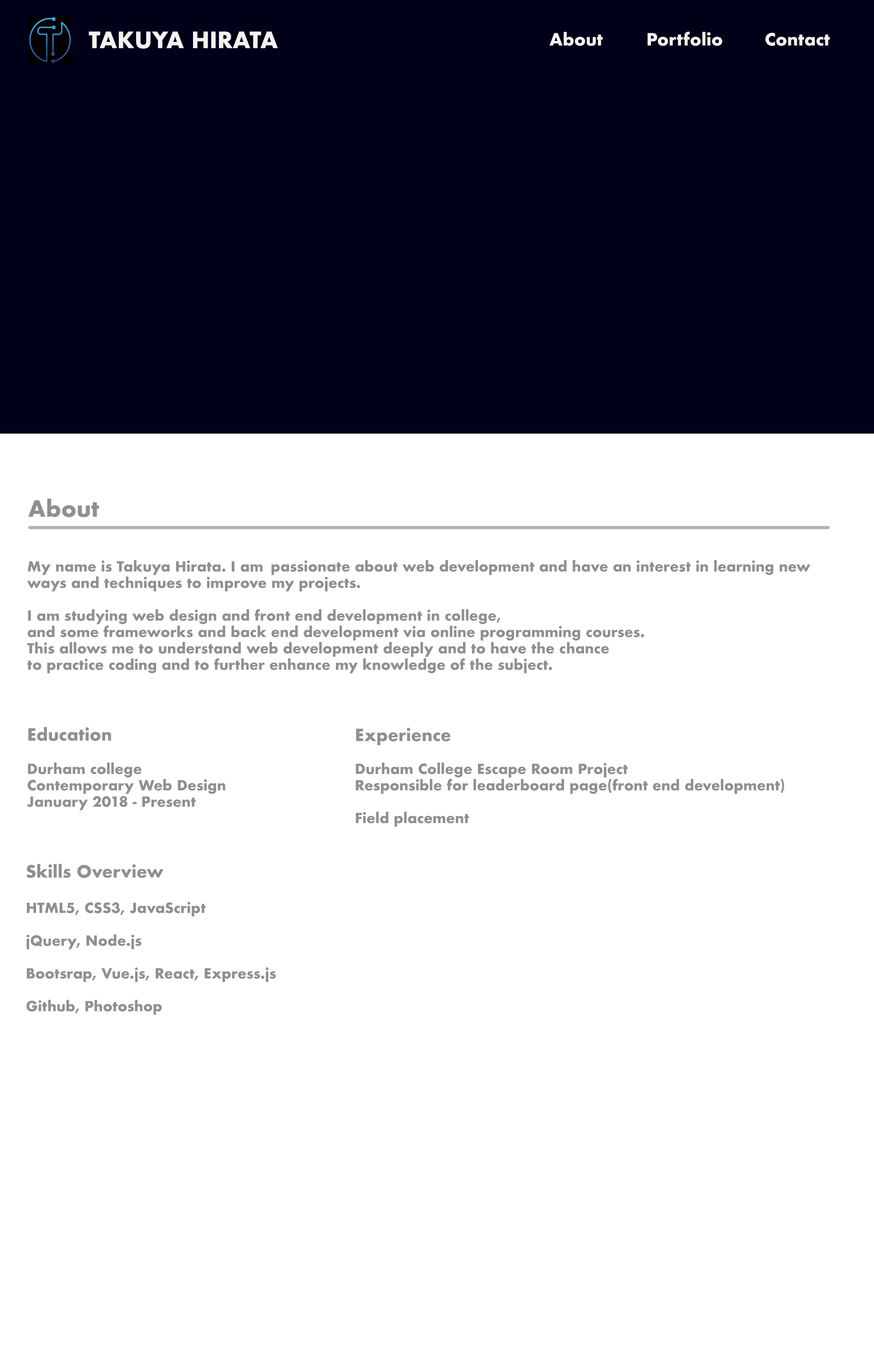
<style>
.page{position:relative;width:874px;height:1365px;background:#ffffff}
.page>*{position:absolute;margin:0}
.t1{font:21.8px "Futura-Bold";color:#f5f1f1}
.t2{font:16.4px "Futura-Bold";color:#f5f1f1}
.t3{font:21.8px "Futura-Bold";color:#908f8f}
.t4{font:13.6px "Futura-Bold";color:#908f8f}
.t5{font:16.4px "Futura-Bold";color:#908f8f}
</style>
<div class="page">
<p class="t1" style="left:89px;top:31px;width:189px;height:18px">TAKUYA HIRATA</p>
<p class="t2" style="left:549px;top:32px;width:53px;height:14px">About</p>
<p class="t2" style="left:647px;top:31px;width:75px;height:15px">Portfolio</p>
<p class="t2" style="left:765px;top:33px;width:64px;height:13px">Contact</p>
<p class="t3" style="left:28px;top:499px;width:71px;height:18px">About</p>
<p class="t4" style="left:27px;top:560px;width:783px;height:113px">My name is Takuya Hirata. I am passionate about web development and have an interest in learning new <br>ways and techniques to improve my projects. <br><br>I am studying web design and front end development in college,<br>and some frameworks and back end development via online programming courses.<br>This allows me to understand web development deeply and to have the chance <br>to practice coding and to further enhance my knowledge of the subject.</p>
<p class="t5" style="left:28px;top:727px;width:83px;height:14px">Education</p>
<p class="t5" style="left:356px;top:728px;width:94px;height:17px">Experience</p>
<p class="t4" style="left:27px;top:763px;width:198px;height:47px">Durham college<br>Contemporary Web Design<br>January 2018 - Present</p>
<p class="t4" style="left:355px;top:763px;width:429px;height:64px">Durham College Escape Room Project<br>Responsible for leaderboard page(front end development)<br><br>Field placement</p>
<p class="t5" style="left:26px;top:864px;width:137px;height:14px">Skills Overview</p>
<p class="t4" style="left:26px;top:902px;width:250px;height:113px">HTML5, CSS3, JavaScript<br><br>jQuery, Node.js<br><br>Bootsrap, Vue.js, React, Express.js<br><br>Github, Photoshop</p>
</div>
